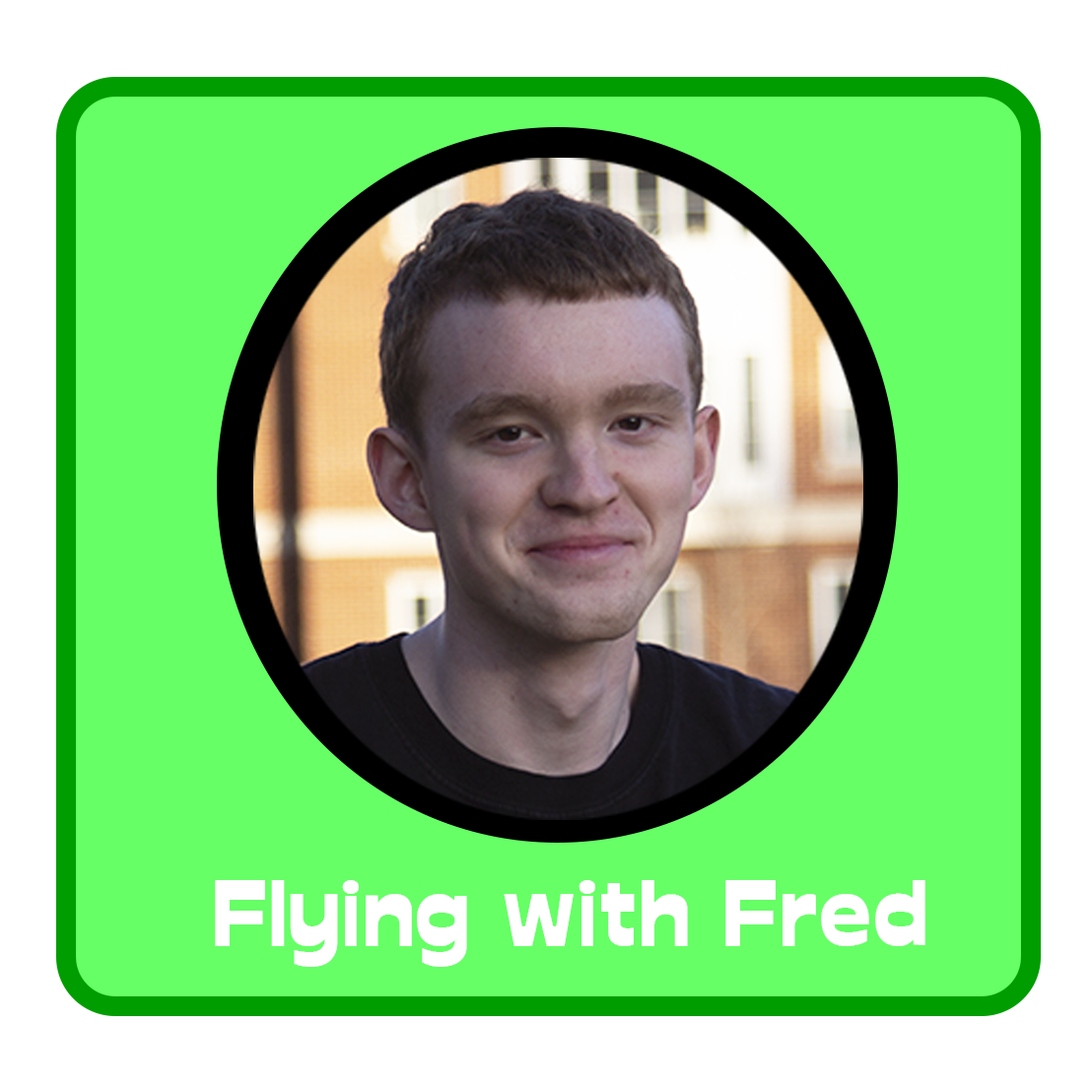
<style>
.page{position:relative;width:1092px;height:1092px;background:#66ff66}
.page>*{position:absolute;margin:0}
.t1{font:90.3px "Glockenspiel";color:#ffffff}
</style>
<div class="page">
<p class="t1" style="left:215px;top:880px;width:710px;height:87px">Flying with Fred</p>
</div>
